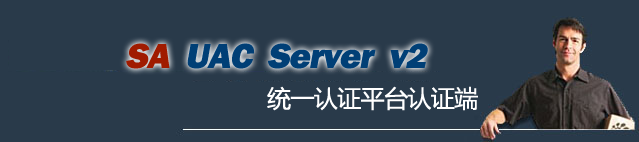
<style>
.page{position:relative;width:639px;height:142px;background:#293a4a}
.page>*{position:absolute;margin:0}
.t1{font:36px "FranklinGothic-Heavy";letter-spacing:-0.025em;color:#003f76;font-style:italic}
.t2{font:36px "FranklinGothic-Heavy";letter-spacing:-0.025em;color:#a01b00;font-style:italic}
.t3{font:24px "MicrosoftYaHei";letter-spacing:-0.025em;color:#ffffff}
</style>
<div class="page">
<p class="t1" style="left:126px;top:43px;width:302px;height:26px"><span class="t2">     SA </span> UAC  Server  v2</p>
<p class="t3" style="left:267px;top:86px;width:211px;height:25px">统一认证平台认证端</p>
</div>
